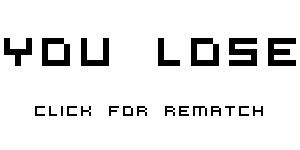
<style>
.page{position:relative;width:300px;height:150px;background:#ffffff}
.page>*{position:absolute;margin:0}
.t1{font:44px "VirtualDJ";color:#000000}
.t2{font:16px "VirtualDJ";color:#000000}
</style>
<div class="page">
<p class="t1" style="left:4px;top:38px;width:292px;height:28px">YOU LOSE</p>
<p class="t2" style="left:35px;top:106px;width:228px;height:10px">Click for rematch</p>
</div>
